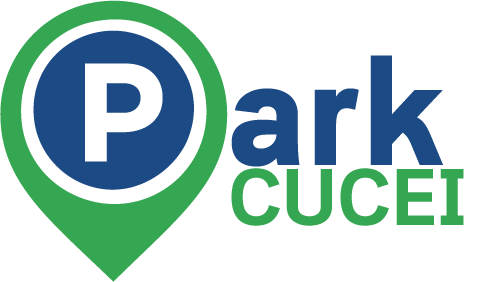
<style>
.page{position:relative;width:482px;height:282px;background:#ffffff}
.page>*{position:absolute;margin:0}
.t1{font:80px/60px "Cloud-Bold";color:#35a651}
.t2{font:150px/60px "Cloud-Bold";color:#1c4a85}
</style>
<div class="page">
<p class="t1" style="left:231px;top:55px;width:233px;height:171px"><span class="t2">ark<br></span>CUCEI</p>
</div>
